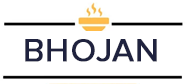
<style>
.page{position:relative;width:189px;height:84px;background:#ffffff}
.page>*{position:absolute;margin:0}
.t1{font:32.6px "ProximaNova-Regular";letter-spacing:0.02em;color:#1f223e;text-transform:uppercase;font-weight:bold}
</style>
<div class="page">
<p class="t1" style="left:25px;top:39px;width:132px;height:23px">BHOJAN</p>
</div>
